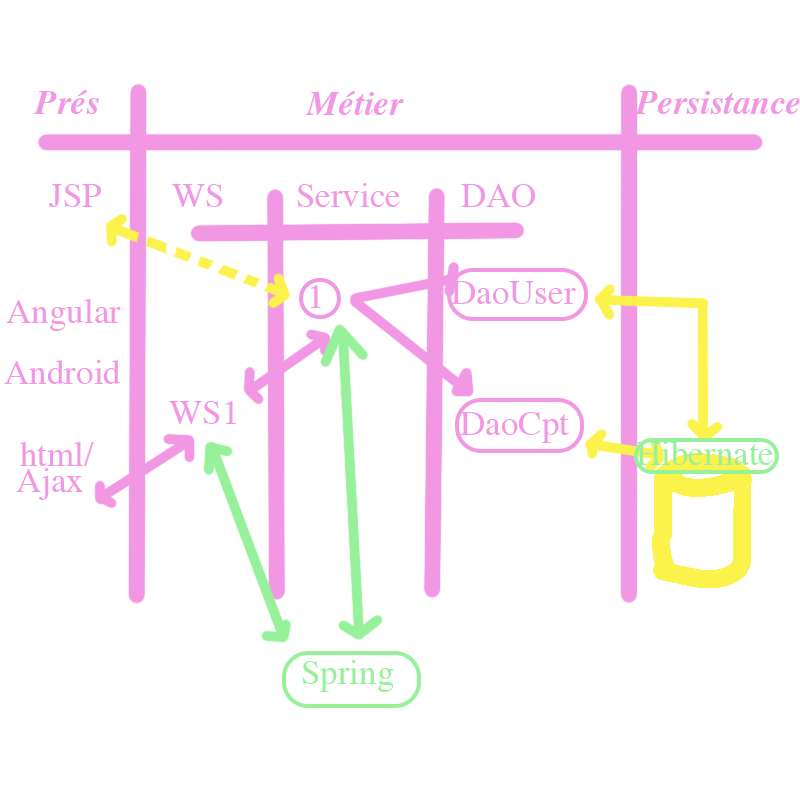
<style>
.page{position:relative;width:800px;height:800px;background:#ffffff}
.page>*{position:absolute;margin:0}
.t1{font:35px "Times-BoldItalic";color:#f197e3}
.t2{font:35px "Times-Roman";color:#f197e3}
.t3{font:35px "Times-Roman";color:#97f19b}
</style>
<div class="page">
<p class="t1" style="left:33px;top:90px;width:66px;height:24px">Prés</p>
<p class="t1" style="left:306px;top:91px;width:98px;height:24px">Métier</p>
<p class="t1" style="left:634px;top:91px;width:166px;height:23px">Persistance</p>
<p class="t2" style="left:49px;top:184px;width:52px;height:23px">JSP</p>
<p class="t2" style="left:172px;top:184px;width:51px;height:23px">WS</p>
<p class="t2" style="left:297px;top:183px;width:103px;height:24px">Service</p>
<p class="t2" style="left:461px;top:184px;width:74px;height:23px">DAO</p>
<p class="t2" style="left:451px;top:281px;width:125px;height:23px">DaoUser</p>
<p class="t2" style="left:310px;top:285px;width:11px;height:23px">1</p>
<p class="t2" style="left:6px;top:299px;width:115px;height:32px">Angular</p>
<p class="t2" style="left:4px;top:360px;width:117px;height:24px">Android</p>
<p class="t2" style="left:169px;top:401px;width:67px;height:23px">WS1</p>
<p class="t2" style="left:460px;top:412px;width:109px;height:31px">DaoCpt</p>
<p class="t3" style="left:636px;top:441px;width:137px;height:24px">Hibernate</p>
<p class="t2" style="left:16px;top:468px;width:67px;height:32px">Ajax</p>
<p class="t3" style="left:302px;top:660px;width:92px;height:32px">Spring</p>
</div>
